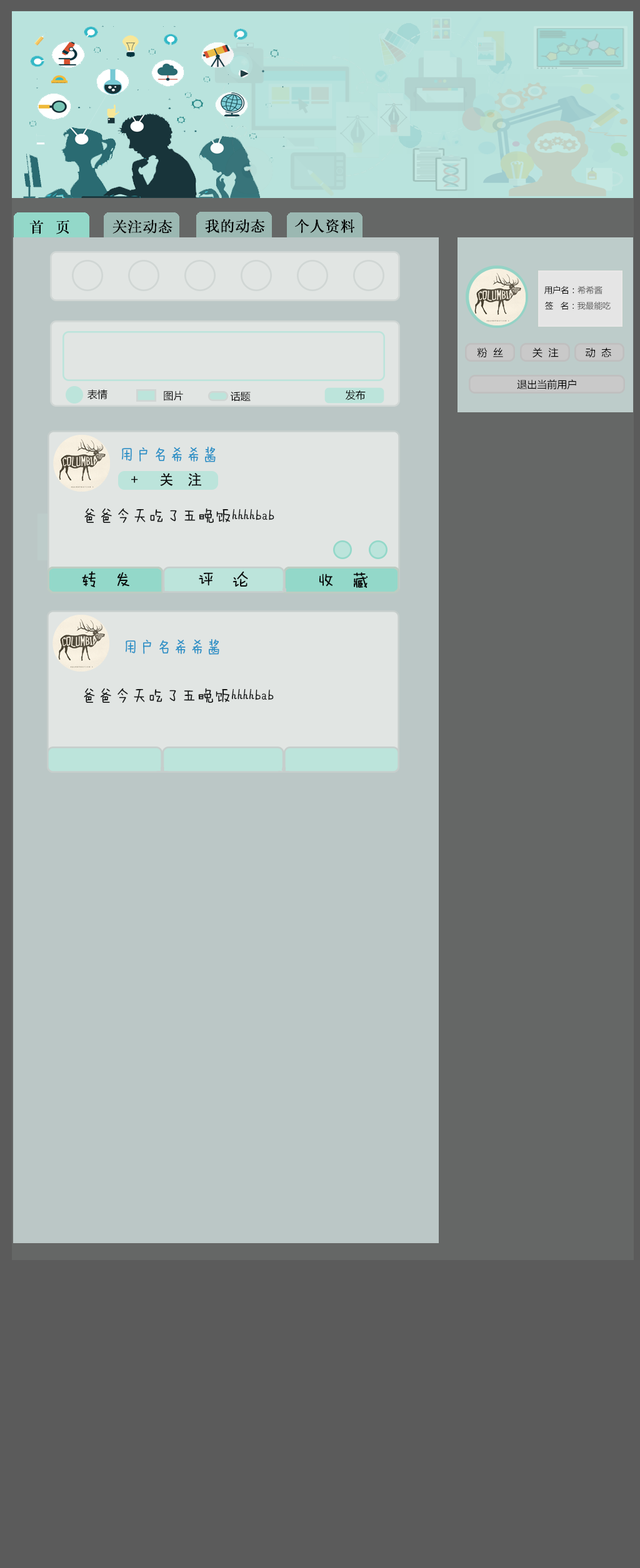
<style>
.page{position:relative;width:640px;height:1568px;background:#bbc7c6}
.page>*{position:absolute;margin:0}
.t1{font:15px "System";color:#000000}
.t2{font:8.3px "MicrosoftYaHei";color:#000000}
.t3{font:8.3px "MicrosoftYaHei";color:#5b5b5b}
.t4{font:10px "MicrosoftYaHei";color:#010101}
.t5{font:7.5px "MicrosoftYaHei";color:#000000}
.t6{font:16.7px "FZMWJW--GB1-0";color:#2e91c6}
.t7{font:14.2px "SimHei";color:#0a0b0b}
.t8{font:16.7px "FZMWJW--GB1-0";color:#151717}
.t9{font:16.7px "FZMWJW--GB1-0";color:#0a0b0b}
</style>
<div class="page">
<p class="t1" style="left:29px;top:220px;width:40px;height:14px">首   页</p>
<p class="t1" style="left:112px;top:219px;width:60px;height:15px">关注动态</p>
<p class="t1" style="left:205px;top:219px;width:60px;height:14px">我的动态</p>
<p class="t1" style="left:295px;top:219px;width:60px;height:14px">个人资料</p>
<p class="t2" style="left:544px;top:285px;width:58px;height:9px">用户名：<span class="t3">希希酱</span></p>
<p class="t2" style="left:545px;top:301px;width:65px;height:9px">签   名：<span class="t3">我最能吃</span></p>
<p class="t4" style="left:477px;top:347px;width:26px;height:11px">粉  丝</p>
<p class="t5" style="left:532px;top:347px;width:26px;height:11px">关  注</p>
<p class="t5" style="left:585px;top:347px;width:26px;height:11px">动  态</p>
<p class="t5" style="left:87px;top:389px;width:20px;height:11px">表情</p>
<p class="t5" style="left:345px;top:390px;width:20px;height:10px">发布</p>
<p class="t5" style="left:517px;top:379px;width:59px;height:11px">退出当前用户</p>
<p class="t5" style="left:164px;top:390px;width:19px;height:11px">图片</p>
<p class="t5" style="left:231px;top:392px;width:20px;height:9px">话题</p>
<p class="t6" style="left:122px;top:447px;width:94px;height:15px">用户名希希酱</p>
<p class="t7" style="left:131px;top:473px;width:70px;height:14px">+   关  注</p>
<p class="t8" style="left:84px;top:508px;width:190px;height:15px">爸爸今天吃了五晚饭hhhhbab</p>
<p class="t9" style="left:82px;top:571px;width:47px;height:16px">转   发</p>
<p class="t9" style="left:199px;top:571px;width:49px;height:16px">评   论</p>
<p class="t9" style="left:319px;top:572px;width:48px;height:16px">收   藏</p>
<p class="t6" style="left:126px;top:639px;width:93px;height:16px">用户名希希酱</p>
<p class="t8" style="left:84px;top:688px;width:190px;height:15px">爸爸今天吃了五晚饭hhhhbab</p>
</div>
